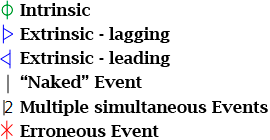
<style>
.page{position:relative;width:270px;height:140px;background:#ffffff}
.page>*{position:absolute;margin:0}
.t1{font:16.7px/24.2px "LucidaBright-Demi";color:#000000}
</style>
<div class="page">
<p class="t1" style="left:20px;top:3px;width:248px;height:134px">Intrinsic<br>Extrinsic - lagging<br>Extrinsic - leading<br>“Naked” Event<br>Multiple simultaneous Events<br>Erroneous Event</p>
</div>
